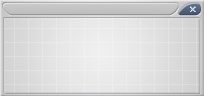
<style>
.page{position:relative;width:204px;height:96px}
.page>*{position:absolute;margin:0}
.t1{font:9px "Silkscreen";letter-spacing:-0.01em;color:#cdf3ff}
</style>
<div class="page">
<p class="t1" style="left:190px;top:6px;width:6px;height:6px">X</p>
</div>
